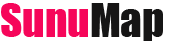
<style>
.page{position:relative;width:169px;height:50px;background:#ffffff}
.page>*{position:absolute;margin:0}
.t1{font:43px "Impact";color:#f6065a}
.t2{font:43px "Impact";color:#161515}
</style>
<div class="page">
<p class="t1" style="left:1px;top:3px;width:162px;height:38px">Sunu<span class="t2">Map</span></p>
</div>
